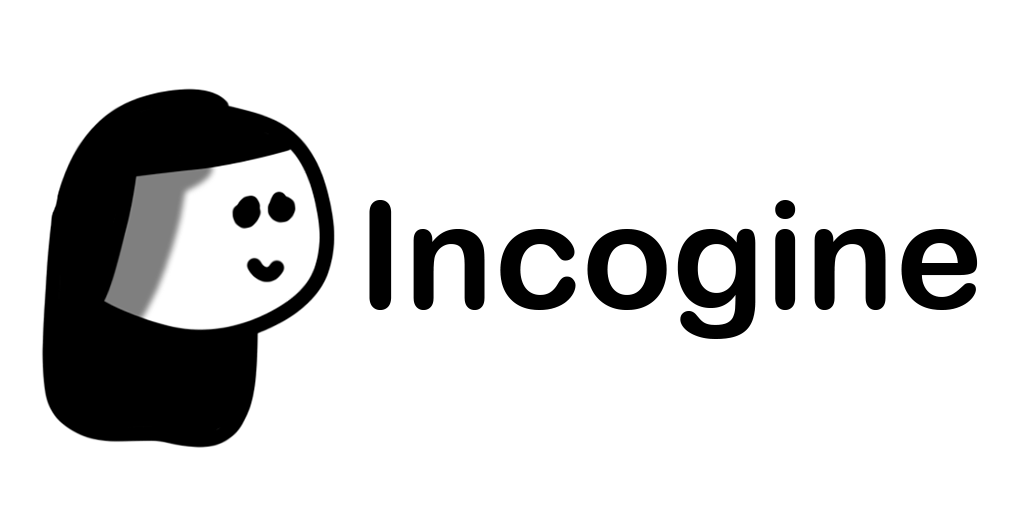
<style>
.page{position:relative;width:1024px;height:512px;background:#ffffff}
.page>*{position:absolute;margin:0}
.t1{font:148.7px "ArialRoundedMTBold";color:#000000}
</style>
<div class="page">
<p class="t1" style="left:369px;top:200px;width:609px;height:139px">Incogine</p>
</div>
